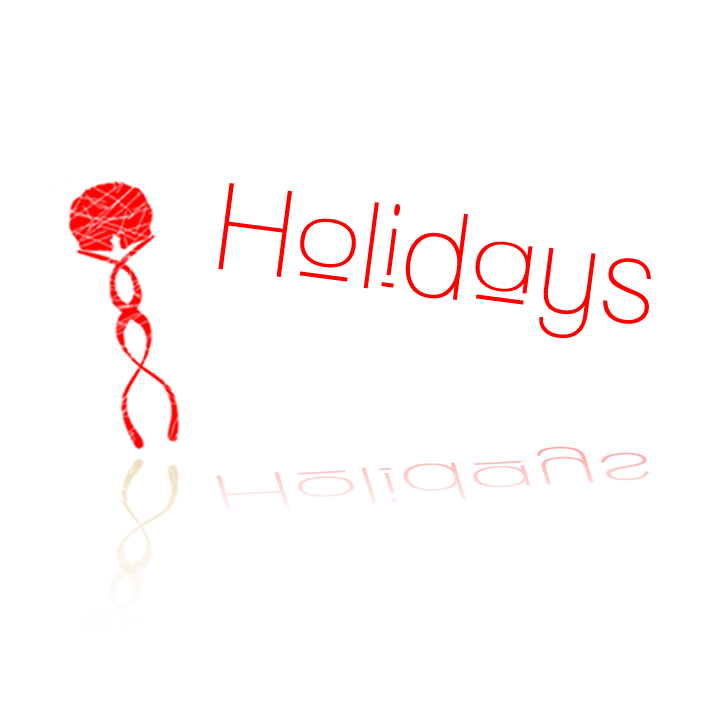
<style>
.page{position:relative;width:720px;height:720px;background:#ffffff}
.page>*{position:absolute;margin:0}
.t1{font:120px "Lane-Upper";color:#ff0000}
.t2{font:52px "Lane-Upper";color:#ffd0d0;scale:2.29 1}
</style>
<div class="page">
<p class="t1" style="left:218px;top:183px;width:433px;height:155px;rotate:7deg">Holidays</p>
<p class="t2" style="left:216px;top:446px;width:433px;height:66px;rotate:-3deg">Holidays</p>
</div>
